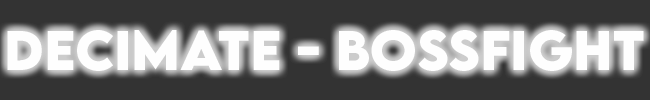
<style>
.page{position:relative;width:650px;height:100px;background:#333333}
.page>*{position:absolute;margin:0}
.t1{font:50px "LEMONMILK-Bold";color:#fefefe}
</style>
<div class="page">
<p class="t1" style="left:7px;top:30px;width:637px;height:41px">Decimate - Bossfight</p>
</div>
